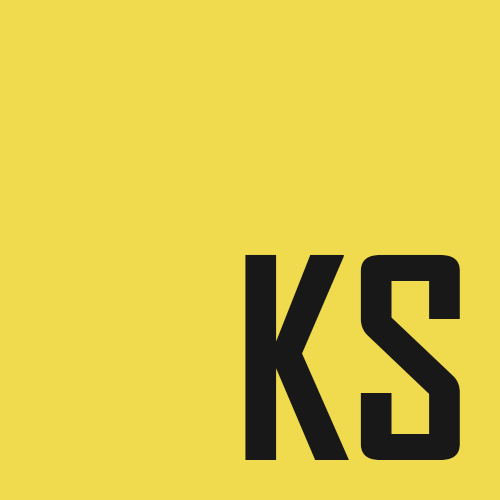
<style>
.page{position:relative;width:500px;height:500px;background:#f0db4f}
.page>*{position:absolute;margin:0}
.t1{font:268px "AgencyFB-Bold";color:#181818}
</style>
<div class="page">
<p class="t1" style="left:245px;top:254px;width:215px;height:206px">KS</p>
</div>
